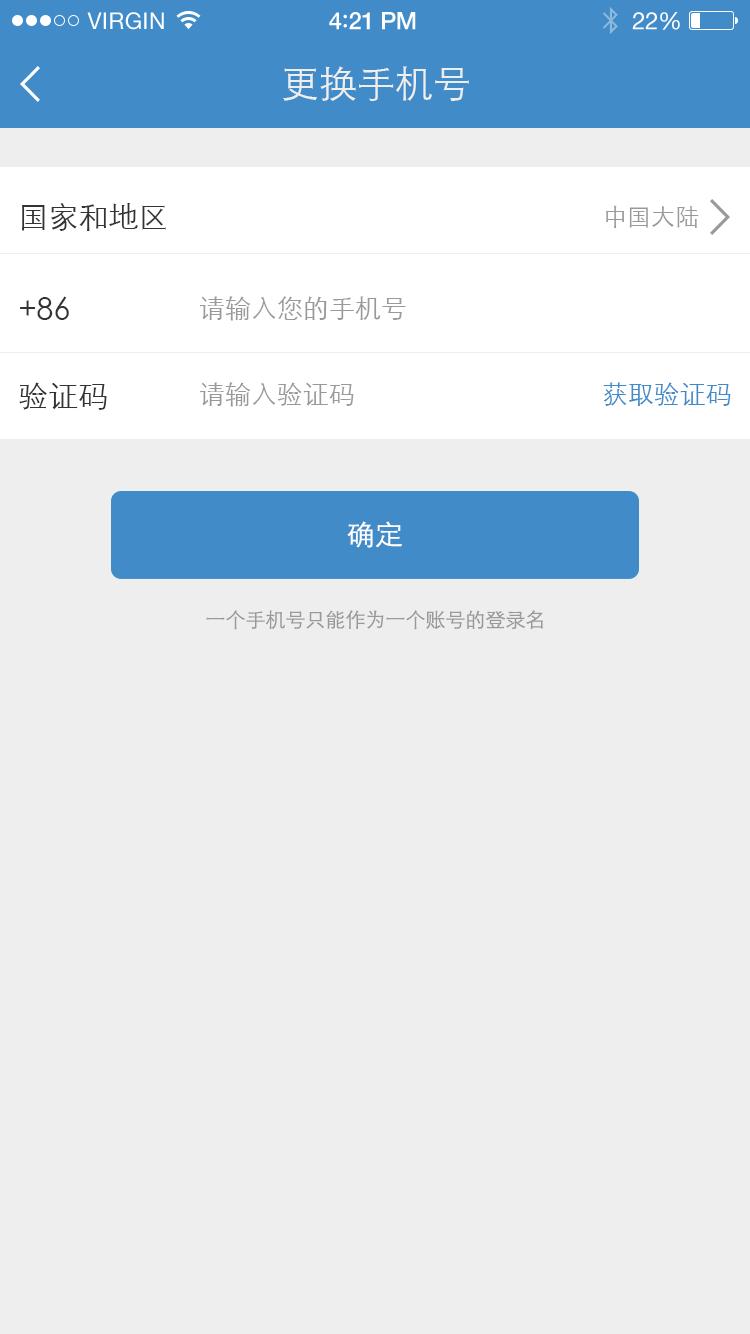
<style>
.page{position:relative;width:750px;height:1334px;background:#eeeeee}
.page>*{position:absolute;margin:0}
.t1{font:23px "HelveticaNeue";letter-spacing:0.02em;color:#ffffff}
.t2{font:24px "HelveticaNeue-Medium";letter-spacing:-0.02em;color:#ffffff}
.t3{font:26px "Avenir-Medium";letter-spacing:-0.02em;color:#ffffff}
.t4{font:24px "HelveticaNeue";letter-spacing:-0.02em;color:#ffffff}
.t5{font:38px "STXihei";color:#eeeeee}
.t6{font:30px "STXihei";color:#333333}
.t7{font:24px "STXihei";color:#999999}
.t8{font:26px "STXihei";color:#999999}
.t9{font:26px "STXihei";color:#418bc8}
.t10{font:28px "STXihei";color:#ffffff}
.t11{font:20px "STXihei";color:#999999}
</style>
<div class="page">
<p class="t1" style="left:87px;top:12px;width:77px;height:18px">VIRGIN</p>
<p class="t2" style="left:329px;top:12px;width:87px;height:18px">4<span class="t3">:</span>21 PM</p>
<p class="t4" style="left:632px;top:12px;width:48px;height:18px">22%</p>
<p class="t5" style="left:283px;top:66px;width:186px;height:35px">更换手机号</p>
<p class="t6" style="left:22px;top:203px;width:144px;height:28px">国家和地区</p>
<p class="t7" style="left:606px;top:205px;width:93px;height:23px">中国大陆</p>
<p class="t6" style="left:20px;top:296px;width:49px;height:24px">+86</p>
<p class="t8" style="left:200px;top:296px;width:206px;height:25px">请输入您的手机号</p>
<p class="t6" style="left:19px;top:382px;width:88px;height:28px">验证码</p>
<p class="t8" style="left:200px;top:382px;width:154px;height:25px">请输入验证码</p>
<p class="t9" style="left:603px;top:382px;width:128px;height:24px">获取验证码</p>
<p class="t10" style="left:347px;top:521px;width:55px;height:27px">确定</p>
<p class="t11" style="left:206px;top:610px;width:337px;height:20px">一个手机号只能作为一个账号的登录名</p>
</div>
